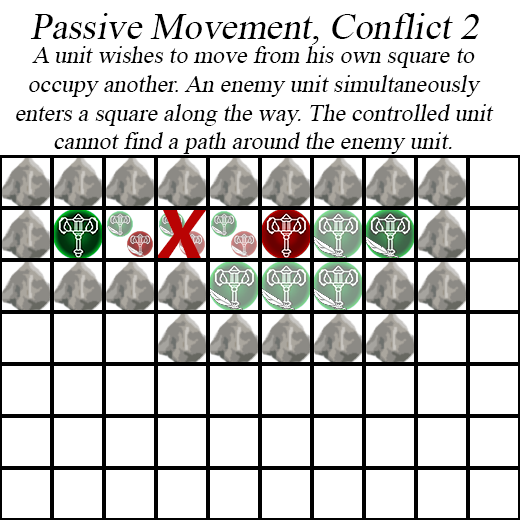
<style>
.page{position:relative;width:520px;height:520px;background:#ffffff}
.page>*{position:absolute;margin:0}
.t1{font:37px "TimesNewRomanPSMT";color:#000000;font-style:italic}
.t2{font:24px "TimesNewRomanPSMT";color:#000000;font-style:italic}
.t3{font:71.6px "Leelawadee-Bold";color:#b90303;font-style:italic}
</style>
<div class="page">
<p class="t1" style="left:30px;top:13px;width:449px;height:32px">Passive Movement, Conflict 2</p>
<p class="t2" style="left:16px;top:46px;width:478px;height:108px;text-align:center">A unit wishes to move from his own square to<br>occupy another. An enemy unit simultaneously<br>enters a square along the way. The controlled unit<br>cannot find a path around the enemy unit.</p>
<p class="t3" style="left:154px;top:208px;width:54px;height:52px;rotate:-2deg">X</p>
</div>
